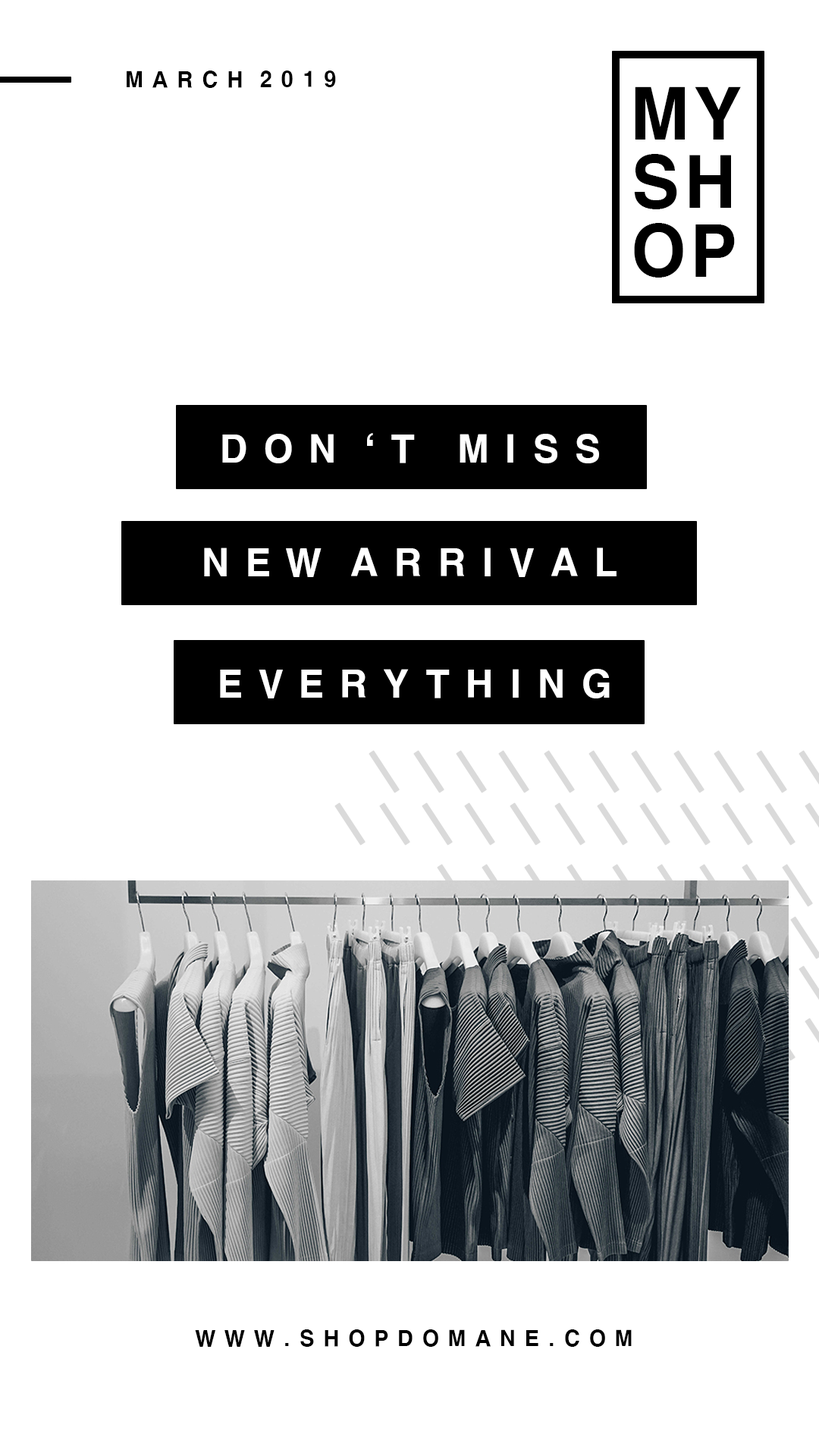
<style>
.page{position:relative;width:819px;height:1456px;background:#ffffff}
.page>*{position:absolute;margin:0}
.t1{font:21.1px "H2gtrE";letter-spacing:0.03em;color:#000000}
.t2{font:68.5px/68.5px "H2gtrE";letter-spacing:0.03em;color:#000000}
.t3{font:36.9px "H2gtrE";letter-spacing:0.03em;color:#ffffff}
</style>
<div class="page">
<p class="t1" style="left:127px;top:71px;width:209px;height:17px">M A R C H  2 0 1 9</p>
<p class="t2" style="left:634px;top:86px;width:107px;height:192px">MY<br>SH<br>OP</p>
<p class="t3" style="left:222px;top:433px;width:377px;height:30px">D O N‘ T   M I S S</p>
<p class="t3" style="left:204px;top:548px;width:413px;height:29px">N E W  A R R I V A L</p>
<p class="t3" style="left:220px;top:669px;width:390px;height:29px">E V E R Y T H I N G</p>
<p class="t1" style="left:195px;top:1329px;width:437px;height:18px">W W W . S H O P D O M A N E . C O M</p>
</div>
